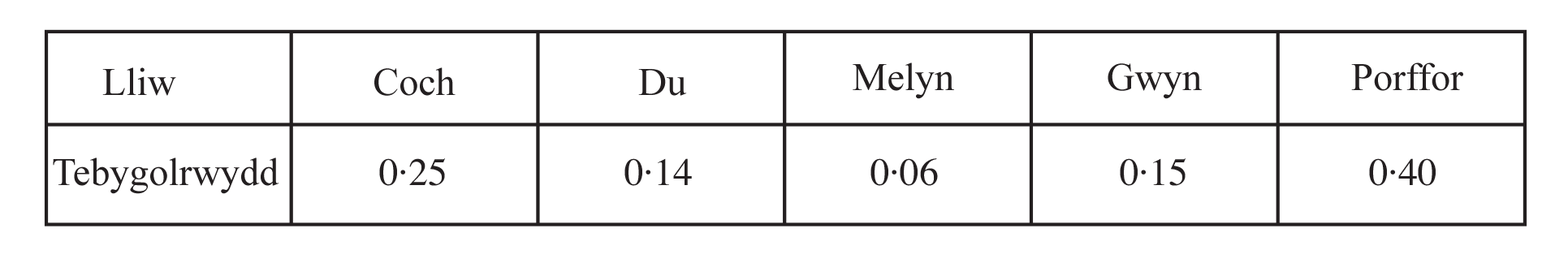
<style>
.page{position:relative;width:1568px;height:263px;background:#ffffff}
.page>*{position:absolute;margin:0}
.t1{font:39px "TimesNewRomanPSMT";color:#231f20}
</style>
<div class="page">
<p class="t1" style="left:853px;top:63px;width:101px;height:36px">Melyn</p>
<p class="t1" style="left:1108px;top:63px;width:94px;height:36px">Gwyn</p>
<p class="t1" style="left:1351px;top:63px;width:112px;height:28px">Porffor</p>
<p class="t1" style="left:102px;top:67px;width:74px;height:29px">Lliw</p>
<p class="t1" style="left:374px;top:67px;width:82px;height:29px">Coch</p>
<p class="t1" style="left:638px;top:69px;width:49px;height:27px">Du</p>
<p class="t1" style="left:53px;top:158px;width:226px;height:36px">Tebygolrwydd</p>
</div>
